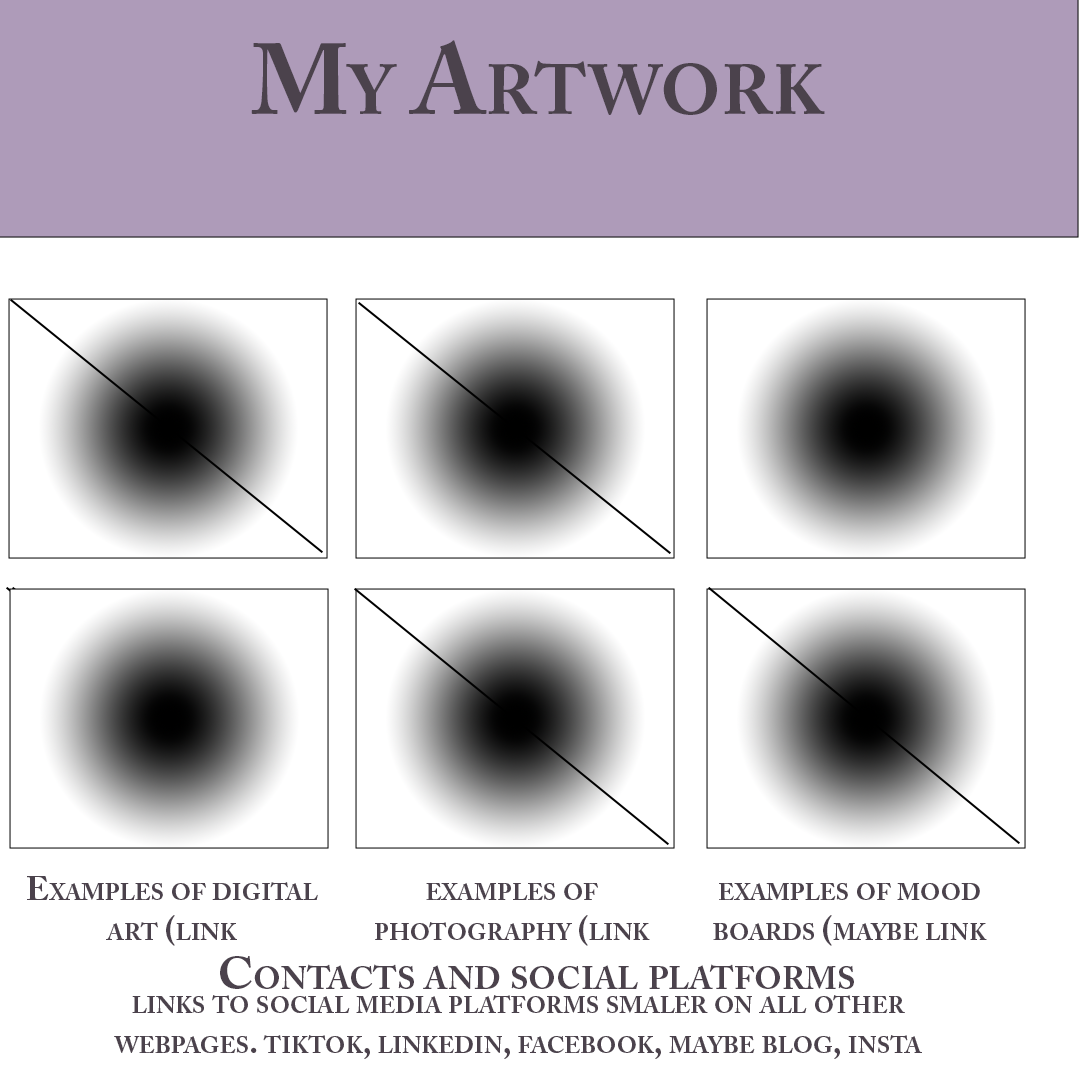
<style>
.page{position:relative;width:1080px;height:1080px;background:#ffffff}
.page>*{position:absolute;margin:0}
.t1{font:100px "ACaslonPro-Bold";color:#4b424c;font-variant:small-caps}
.t2{font:33.3px "ACaslonPro-Bold";color:#4b424c;font-variant:small-caps}
.t3{font:45.8px "ACaslonPro-Bold";color:#4b424c;font-variant:small-caps}
</style>
<div class="page">
<p class="t1" style="left:251px;top:40px;width:574px;height:75px">My Artwork</p>
<p class="t2" style="left:27px;top:876px;width:291px;height:70px;text-align:center">Examples of digital art (link</p>
<p class="t2" style="left:375px;top:883px;width:275px;height:63px;text-align:center">examples of photography (link</p>
<p class="t2" style="left:713px;top:883px;width:274px;height:63px;text-align:center">examples of mood boards (maybe link</p>
<p class="t3" style="left:220px;top:956px;width:634px;height:33px">Contacts and social platforms</p>
<p class="t2" style="left:114px;top:995px;width:808px;height:64px;text-align:center">links to social media platforms smaler on all other webpages. tiktok, linkedin, facebook, maybe blog, insta</p>
</div>
